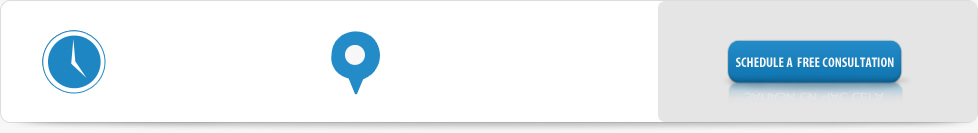
<style>
.page{position:relative;width:978px;height:133px;background:#ffffff}
.page>*{position:absolute;margin:0}
.t1{font:14px "MyriadPro-BoldCond";color:#f7f7f7;text-transform:uppercase}
</style>
<div class="page">
<p class="t1" style="left:736px;top:57px;width:158px;height:10px">Schedule a  Free consultation</p>
</div>
